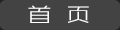
<style>
.page{position:relative;width:120px;height:30px;background:#434343}
.page>*{position:absolute;margin:0}
.t1{font:20.8px "ZHSRXT--GBK1-0";color:#ffffff;scale:1.2 1}
</style>
<div class="page">
<p class="t1" style="left:28px;top:5px;width:61px;height:18px">首  页</p>
</div>
